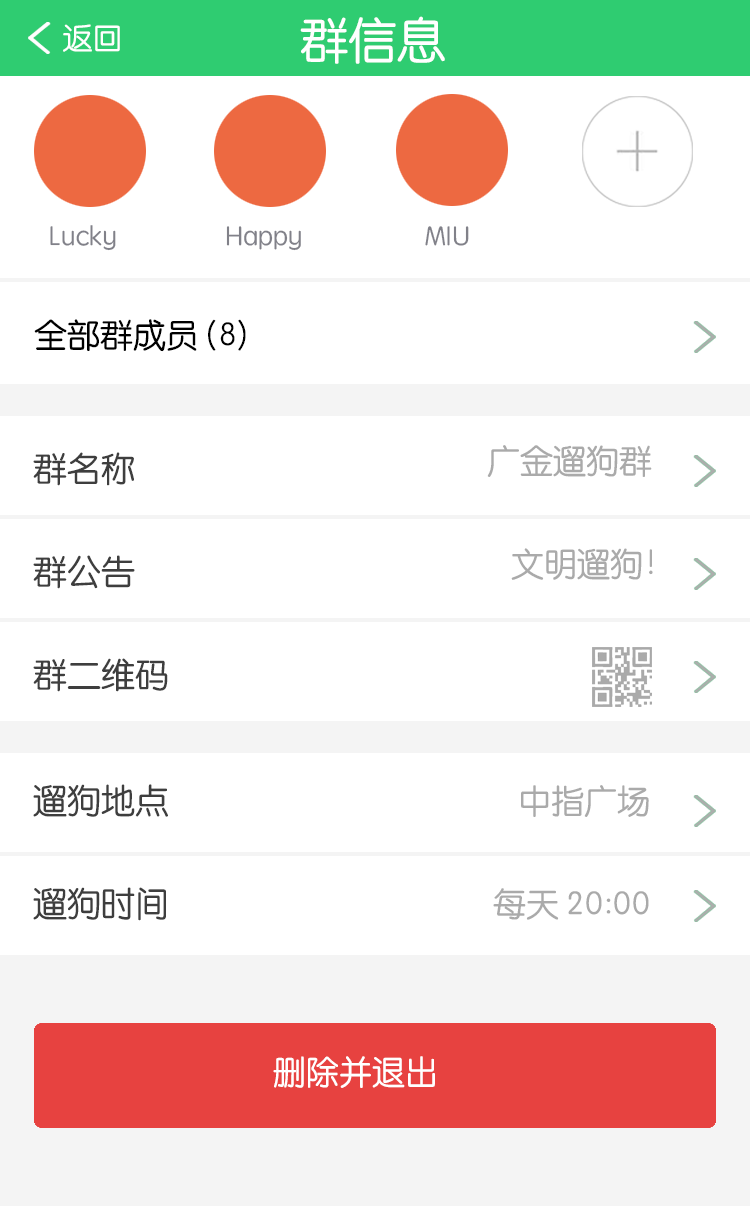
<style>
.page{position:relative;width:750px;height:1206px;background:#ffffff}
.page>*{position:absolute;margin:0}
.t1{font:48.7px "STYuanti-SC-Regular";color:#ffffff}
.t2{font:30px "STYuanti-SC-Regular";color:#ffffff}
.t3{font:27px "STYuanti-SC-Regular";color:#818189}
.t4{font:33px "STYuanti-SC-Regular";color:#000000}
.t5{font:33px/103px "STYuanti-SC-Regular";color:#aaaaaa}
.t6{font:34px/103px "STYuanti-SC-Regular";color:#3e3e3e}
.t7{font:34px/126px "STYuanti-SC-Regular";color:#3e3e3e}
.t8{font:33px "STYuanti-SC-Regular";color:#ffffff}
</style>
<div class="page">
<p class="t1" style="left:300px;top:16px;width:145px;height:48px">群信息</p>
<p class="t2" style="left:63px;top:24px;width:57px;height:28px">返回</p>
<p class="t3" style="left:50px;top:225px;width:419px;height:26px">Lucky                Happy                  MIU</p>
<p class="t4" style="left:34px;top:319px;width:212px;height:33px">全部群成员(8)</p>
<p class="t5" style="left:487px;top:445px;width:166px;height:135px">广金遛狗群<br>   文明遛狗！</p>
<p class="t6" style="left:33px;top:452px;width:135px;height:240px"><span class="t7"><br><br></span>群名称<br>群公告<br>群二维码</p>
<p class="t6" style="left:33px;top:784px;width:135px;height:137px">遛狗地点<br>遛狗时间</p>
<p class="t5" style="left:493px;top:785px;width:156px;height:135px">中指广场<br>每天 20:00</p>
<p class="t8" style="left:273px;top:1056px;width:162px;height:32px">删除并退出</p>
</div>
